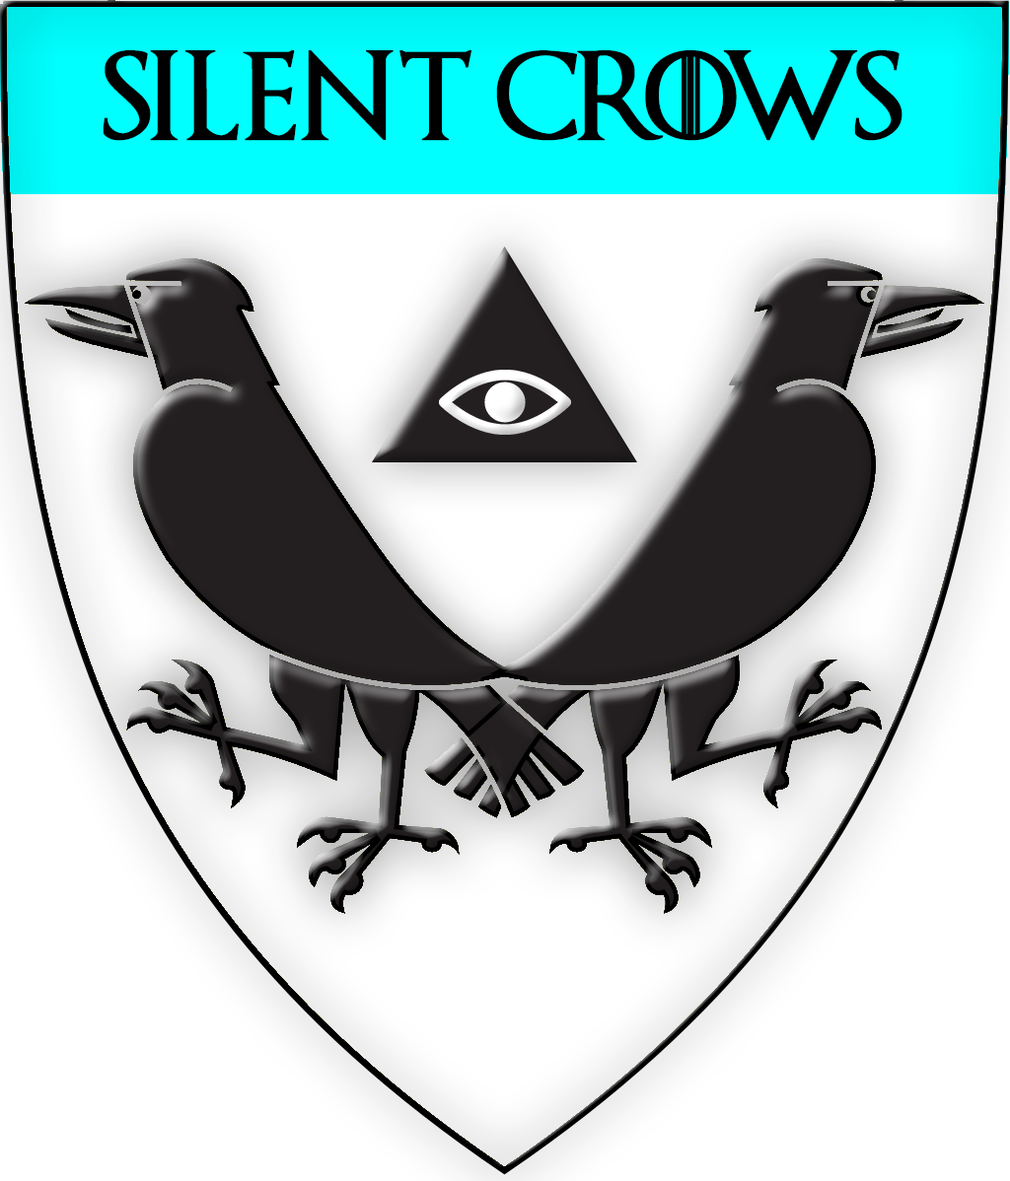
<style>
.page{position:relative;width:1010px;height:1181px;background:#ffffff}
.page>*{position:absolute;margin:0}
.t1{font:88.7px "GameofThrones";color:#000000;font-weight:bold}
</style>
<div class="page">
<p class="t1" style="left:103px;top:50px;width:799px;height:91px">Silent Crows</p>
</div>
